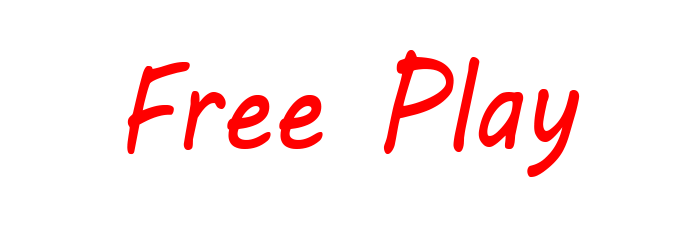
<style>
.page{position:relative;width:700px;height:250px;background:#ffffff}
.page>*{position:absolute;margin:0}
.t1{font:125px "MVBoli";color:#ff0000;scale:0.84 1}
</style>
<div class="page">
<p class="t1" style="left:127px;top:50px;width:453px;height:127px">Free Play</p>
</div>
